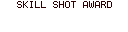
<style>
.page{position:relative;width:128px;height:32px;background:#ffffff}
.page>*{position:absolute;margin:0}
.t1{font:8px "Terminal";color:#2a0000}
</style>
<div class="page">
<p class="t1" style="left:17px;top:1px;width:95px;height:7px">SKILL SHOT AWARD</p>
</div>
